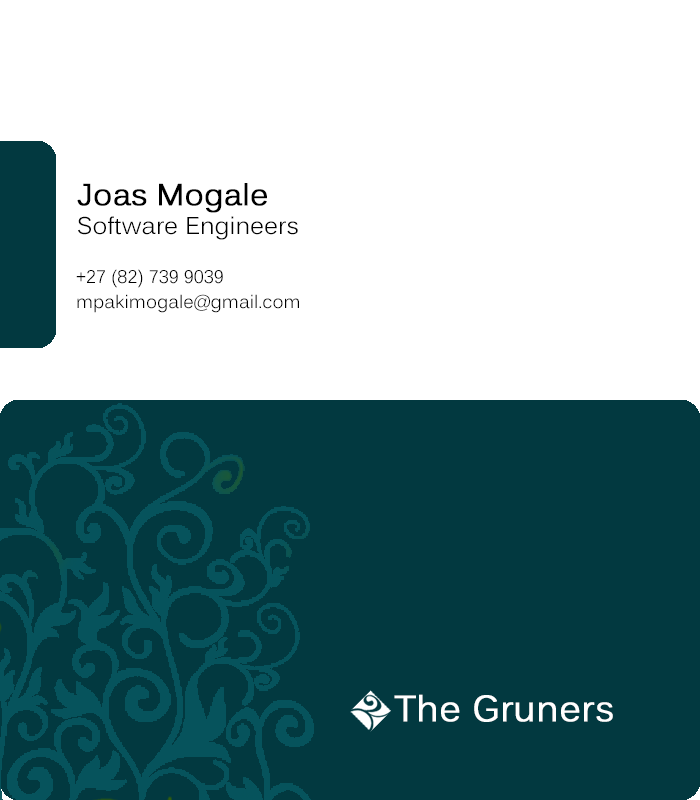
<style>
.page{position:relative;width:700px;height:800px;background:#ffffff}
.page>*{position:absolute;margin:0}
.t1{font:30px "Kalinga";color:#000000;font-weight:bold}
.t2{font:24px "Kalinga";color:#000000}
.t3{font:18px "Kalinga";color:#000000}
.t4{font:36px "Kalinga";color:#ffffff;font-weight:bold}
</style>
<div class="page">
<p class="t1" style="left:77px;top:183px;width:190px;height:30px">Joas Mogale</p>
<p class="t2" style="left:78px;top:216px;width:220px;height:24px">Software Engineers</p>
<p class="t3" style="left:76px;top:269px;width:147px;height:19px">+27 (82) 739 9039</p>
<p class="t3" style="left:77px;top:294px;width:222px;height:19px">mpakimogale@gmail.com</p>
<p class="t4" style="left:394px;top:694px;width:219px;height:28px">The Gruners</p>
</div>
